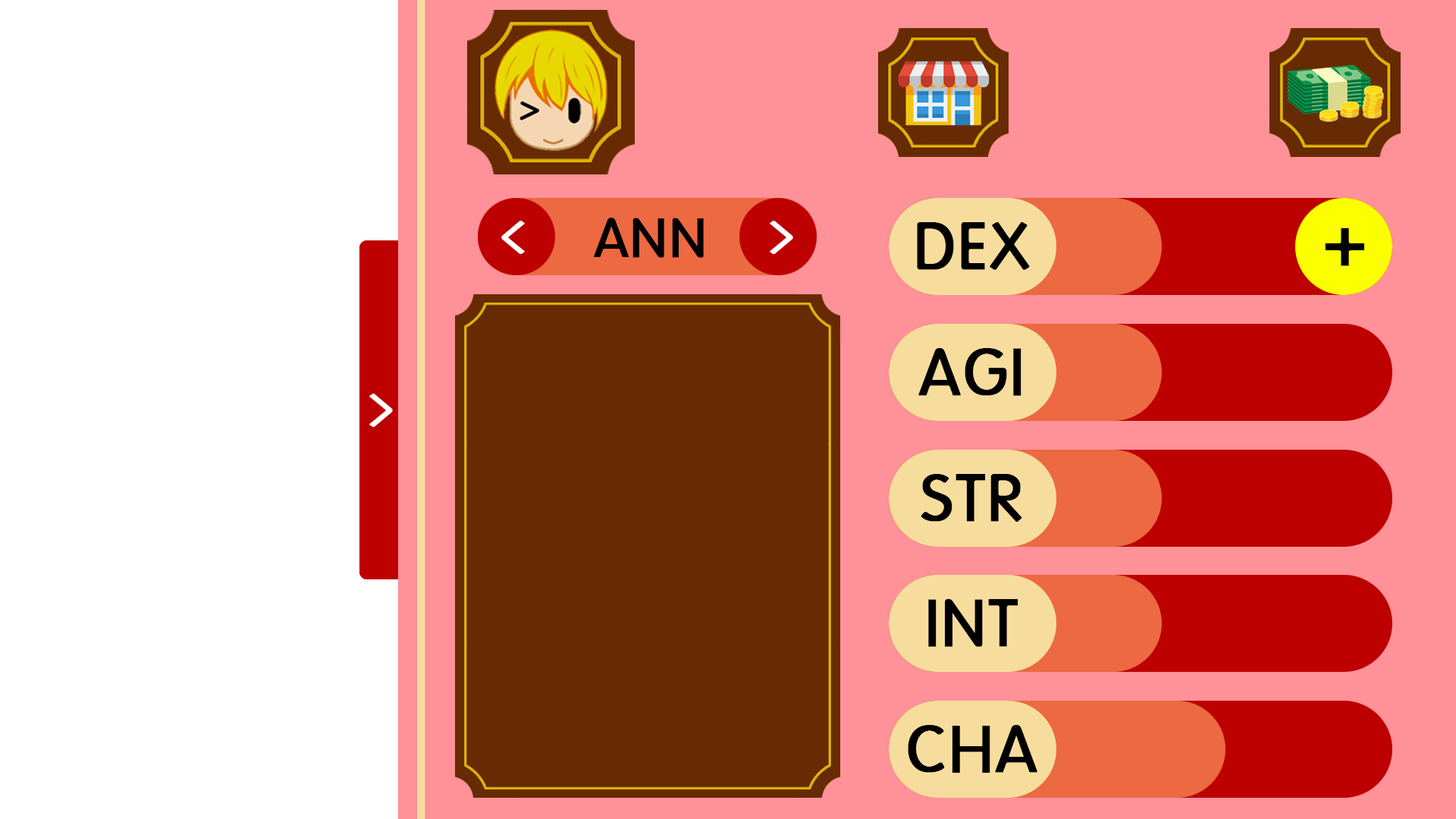
<style>
.page{position:relative;width:1456px;height:819px;background:#ffffff}
.page>*{position:absolute;margin:0}
.t1{font:56.9px "HYkanM";color:#000000;font-weight:bold}
.t2{font:68.5px "HYkanM";color:#000000;font-weight:bold}
.t3{font:75.8px "HYkanM";color:#000000;font-weight:bold}
</style>
<div class="page">
<p class="t1" style="left:594px;top:218px;width:110px;height:40px">ANN</p>
<p class="t2" style="left:917px;top:222px;width:113px;height:48px">DEX</p>
<p class="t3" style="left:1325px;top:227px;width:39px;height:39px">+</p>
<p class="t2" style="left:918px;top:348px;width:103px;height:48px">AGI</p>
<p class="t2" style="left:921px;top:474px;width:101px;height:48px">STR</p>
<p class="t2" style="left:928px;top:599px;width:90px;height:48px">INT</p>
<p class="t2" style="left:908px;top:725px;width:129px;height:48px">CHA</p>
</div>
